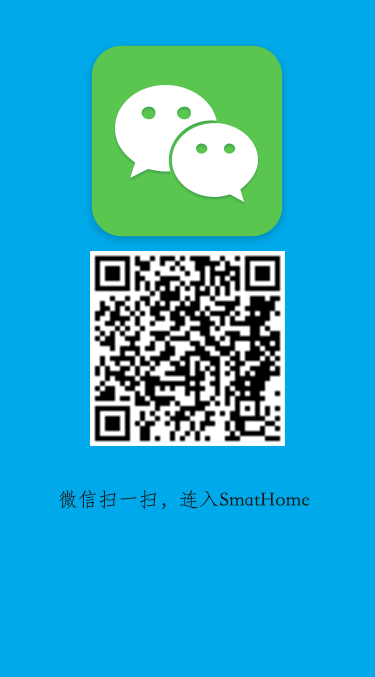
<style>
.page{position:relative;width:375px;height:677px;background:#00a9e9}
.page>*{position:absolute;margin:0}
.t1{font:20px "STFangsong";letter-spacing:0.01em;color:#181919}
</style>
<div class="page">
<p class="t1" style="left:58px;top:489px;width:252px;height:20px">微信扫一扫，连入SmatHome</p>
</div>
